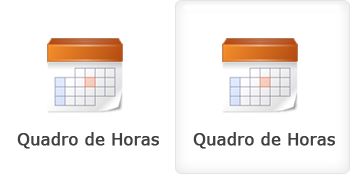
<style>
.page{position:relative;width:350px;height:175px;background:#ffffff}
.page>*{position:absolute;margin:0}
.t1{font:16px "Verdana";color:#404040;font-weight:bold}
</style>
<div class="page">
<p class="t1" style="left:17px;top:132px;width:142px;height:17px">Quadro de Horas</p>
<p class="t1" style="left:193px;top:132px;width:142px;height:17px">Quadro de Horas</p>
</div>
